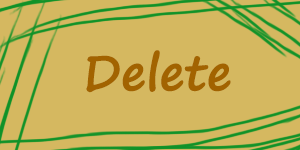
<style>
.page{position:relative;width:300px;height:150px;background:#d5b860}
.page>*{position:absolute;margin:0}
.t1{font:48px "SegoePrint-Bold";color:#a26300}
</style>
<div class="page">
<p class="t1" style="left:86px;top:50px;width:145px;height:43px">Delete</p>
</div>
